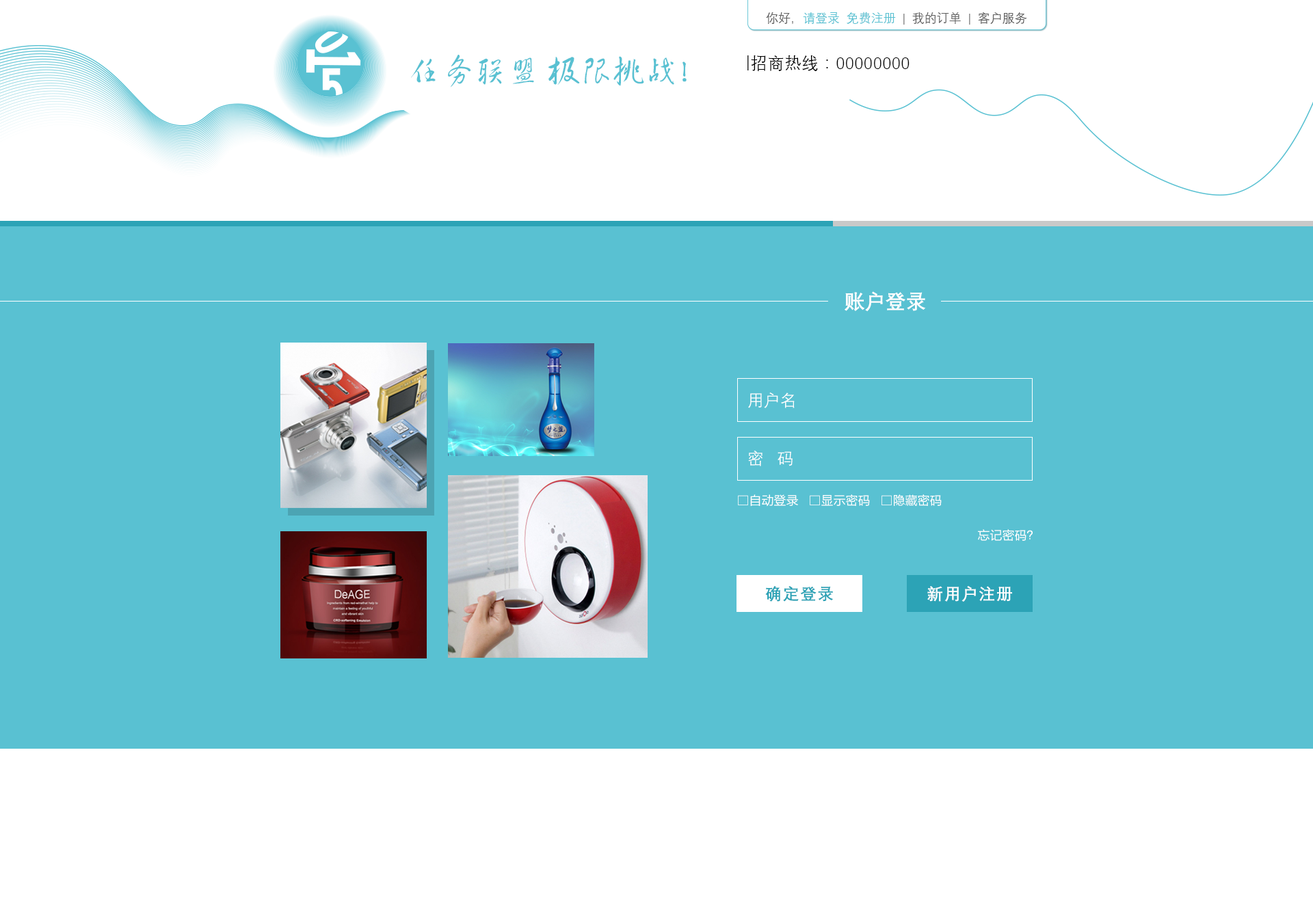
<style>
.page{position:relative;width:1313px;height:908px;background:#59c1d2}
.page>*{position:absolute;margin:0}
.t1{font:12.3px "DengXian-Regular";color:#606060}
.t2{font:12.3px "DengXian-Regular";color:#59c1d2}
.t3{font:35.5px "FZHCJW--GB1-0";letter-spacing:-0.08em;color:#59c1d2}
.t4{font:16.4px "DengXian-Regular";letter-spacing:0.04em;color:#000000}
.t5{font:20.5px "DengXian-Bold";color:#ffffff}
.t6{font:16.4px/58px "DengXian-Regular";color:#ffffff}
.t7{font:12.3px "FZLTHK--GBK1-0";color:#ffffff}
.t8{font:16.4px "DengXian-Bold";letter-spacing:0.06em;color:#2ca3b6}
.t9{font:16.4px "DengXian-Bold";letter-spacing:0.06em;color:#ffffff}
</style>
<div class="page">
<p class="t1" style="left:766px;top:12px;width:261px;height:13px">你好，<span class="t2">请登录  免费注册</span>  |  我的订单  |  客户服务</p>
<p class="t3" style="left:411px;top:55px;width:276px;height:33px">任务联盟  极限挑战！</p>
<p class="t4" style="left:747px;top:55px;width:163px;height:16px">|招商热线：00000000</p>
<p class="t5" style="left:845px;top:291px;width:81px;height:21px">账户登录</p>
<p class="t6" style="left:748px;top:393px;width:47px;height:73px">用户名<br>密   码</p>
<p class="t7" style="left:738px;top:494px;width:204px;height:13px">□自动登录   □显示密码   □隐藏密码</p>
<p class="t7" style="left:978px;top:529px;width:55px;height:12px">忘记密码？</p>
<p class="t8" style="left:765px;top:586px;width:69px;height:16px">确定登录</p>
<p class="t9" style="left:927px;top:586px;width:85px;height:16px">新用户注册</p>
</div>
